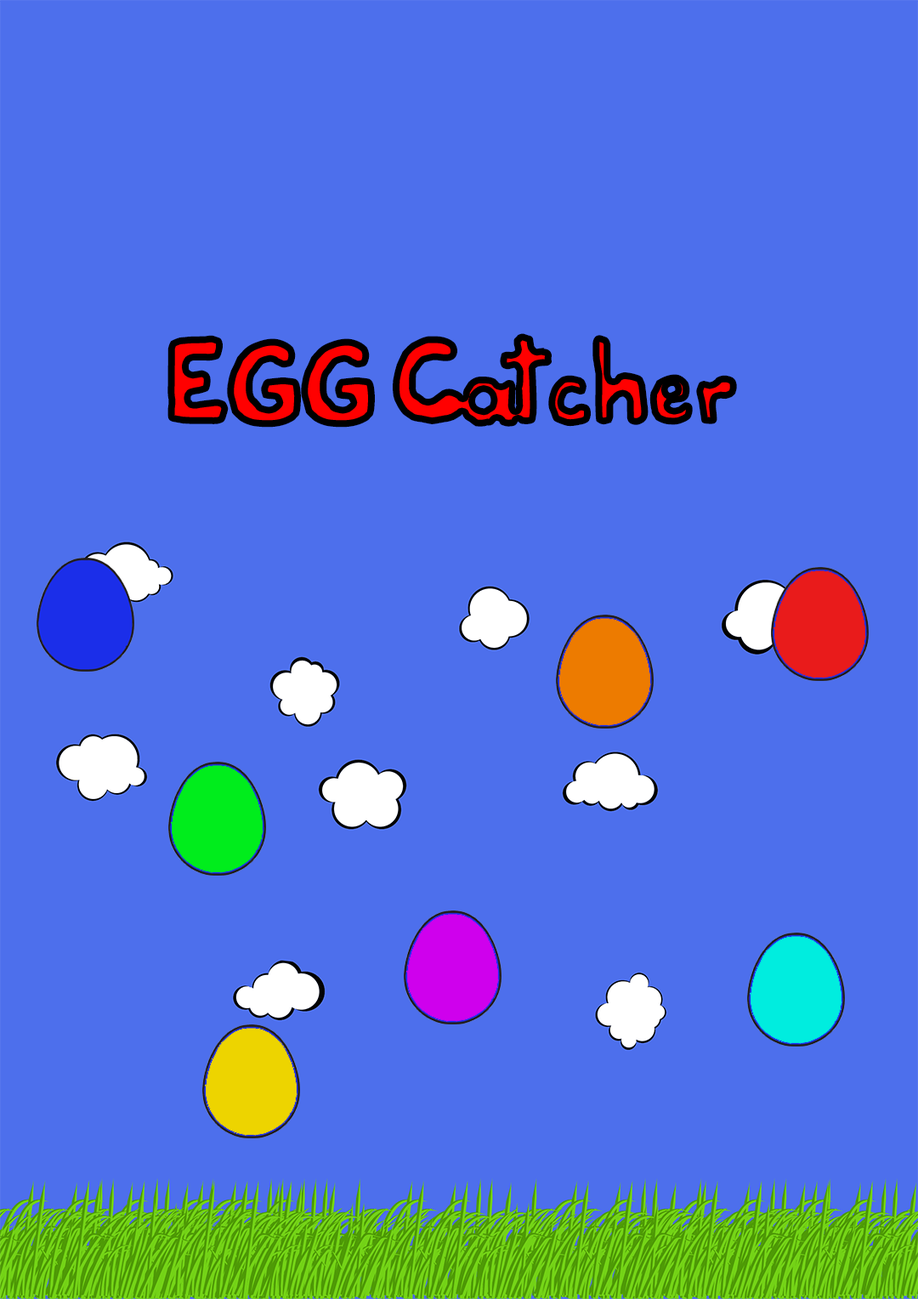
<style>
.page{position:relative;width:918px;height:1299px;background:#4d6fec}
.page>*{position:absolute;margin:0}
.t1{font:74.4px "Schrift"}
</style>
<div class="page">
<p class="t1" style="left:167px;top:333px;width:570px;height:95px">EGG Catcher</p>
</div>
